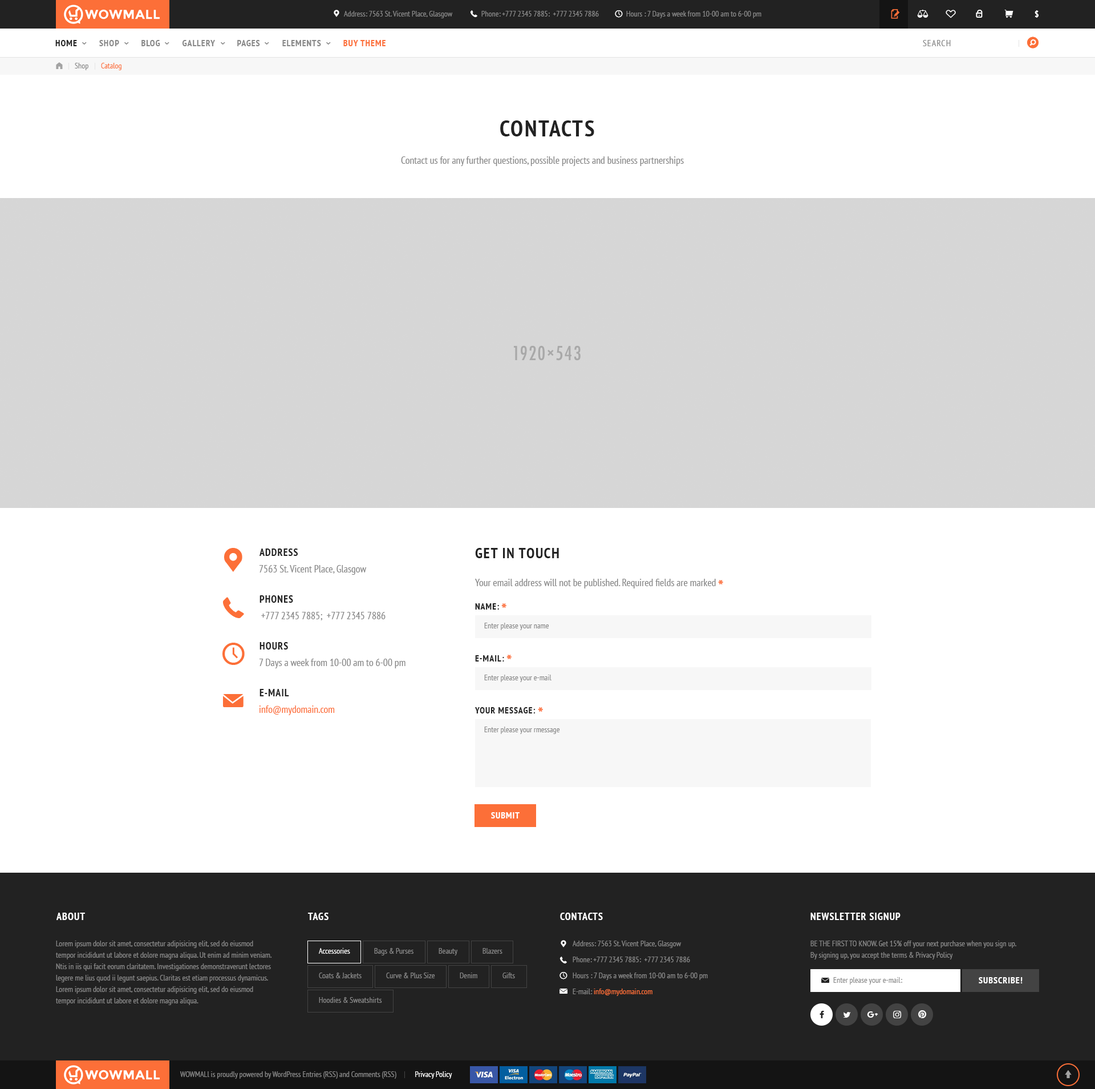
<style>
.page{position:relative;width:1095px;height:1089px;background:#ffffff}
.page>*{position:absolute;margin:0}
.t1{font:8px "PTSans-Narrow";color:#888888}
.t2{font:9.1px "PTSans-NarrowBold";letter-spacing:0.06em;color:#ffffff;text-transform:uppercase}
.t3{font:9.1px "PTSans-NarrowBold";letter-spacing:0.06em;color:#888888;text-transform:uppercase}
.t4{font:9.1px "PTSans-NarrowBold";letter-spacing:0.06em;color:#222222;text-transform:uppercase}
.t5{font:9.1px "PTSans-NarrowBold";letter-spacing:0.06em;color:#fc6f38;text-transform:uppercase}
.t6{font:9.1px "PTSans-Narrow";letter-spacing:0.06em;color:#888888;text-transform:uppercase}
.t7{font:8px "PTSans-Narrow";color:#fc6f38}
.t8{font:22.8px "PTSans-NarrowBold";letter-spacing:0.06em;color:#222222;text-transform:uppercase}
.t9{font:10.3px "PTSans-Narrow";color:#888888}
.t10{font:10.3px "PTSans-NarrowBold";letter-spacing:0.06em;color:#222222;text-transform:uppercase}
.t11{font:14.8px "PTSans-NarrowBold";letter-spacing:0.06em;color:#222222;text-transform:uppercase}
.t12{font:17.1px "PTSans-NarrowBold";letter-spacing:0.06em;color:#fc6f38;text-transform:uppercase}
.t13{font:10.3px "PTSans-Narrow";color:#fc6f38}
.t14{font:10.3px "PTSans-NarrowBold";letter-spacing:0.06em;color:#ffffff;text-transform:uppercase}
.t15{font:8px/11.4px "PTSans-Narrow";color:#888888}
.t16{font:8px/16px "PTSans-Narrow";color:#888888}
.t17{font:8px/16px "PTSans-Narrow";color:#fc6f38}
.t18{font:8px "PTSans-Narrow";color:#ffffff}
</style>
<div class="page">
<p class="t1" style="left:344px;top:11px;width:109px;height:7px">Address: 7563 St. Vicent Place, Glasgow</p>
<p class="t1" style="left:482px;top:11px;width:117px;height:6px">Phone: +777 2345 7885:  +777 2345 7886</p>
<p class="t1" style="left:626px;top:11px;width:136px;height:7px">Hours : 7 Days a week from 10-00 am to 6-00 pm</p>
<p class="t2" style="left:1035px;top:10px;width:4px;height:8px">$</p>
<p class="t3" style="left:55px;top:40px;width:331px;height:6px"><span class="t4">Home </span>        Shop         Blog         Gallery         Pages         elements         <span class="t5">Buy Theme</span></p>
<p class="t6" style="left:923px;top:40px;width:28px;height:6px">Search</p>
<p class="t1" style="left:75px;top:63px;width:13px;height:7px">Shop</p>
<p class="t7" style="left:101px;top:63px;width:21px;height:7px">Catalog</p>
<p class="t8" style="left:500px;top:120px;width:94px;height:16px">Contacts</p>
<p class="t9" style="left:401px;top:156px;width:283px;height:10px">Contact us for any further questions, possible projects and business partnerships</p>
<p class="t10" style="left:260px;top:548px;width:38px;height:8px">Address</p>
<p class="t11" style="left:475px;top:548px;width:84px;height:10px">GET IN TOUCH</p>
<p class="t9" style="left:259px;top:565px;width:108px;height:10px">7563 St. Vicent Place, Glasgow</p>
<p class="t9" style="left:475px;top:579px;width:241px;height:9px">Your email address will not be published. Required fields are marked</p>
<p class="t12" style="left:718px;top:580px;width:5px;height:4px">*</p>
<p class="t10" style="left:260px;top:595px;width:33px;height:7px">phones</p>
<p class="t4" style="left:475px;top:603px;width:24px;height:6px">Name:</p>
<p class="t12" style="left:501px;top:603px;width:6px;height:5px">*</p>
<p class="t9" style="left:261px;top:612px;width:125px;height:8px">+777 2345 7885;  +777 2345 7886</p>
<p class="t1" style="left:484px;top:622px;width:65px;height:8px">Enter please your name</p>
<p class="t10" style="left:260px;top:642px;width:28px;height:7px">hours</p>
<p class="t9" style="left:259px;top:658px;width:147px;height:10px">7 Days a week from 10-00 am to 6-00 pm</p>
<p class="t4" style="left:475px;top:655px;width:29px;height:6px">e-mail:</p>
<p class="t12" style="left:507px;top:654px;width:5px;height:5px">*</p>
<p class="t1" style="left:484px;top:674px;width:68px;height:8px">Enter please your e-mail</p>
<p class="t10" style="left:260px;top:689px;width:29px;height:7px">E-mail</p>
<p class="t13" style="left:259px;top:705px;width:76px;height:10px">info@mydomain.com</p>
<p class="t4" style="left:475px;top:707px;width:61px;height:6px">YOUR message:</p>
<p class="t12" style="left:538px;top:707px;width:5px;height:4px">*</p>
<p class="t1" style="left:484px;top:726px;width:76px;height:8px">Enter please your rmessage</p>
<p class="t2" style="left:491px;top:812px;width:29px;height:6px">Submit</p>
<p class="t14" style="left:56px;top:912px;width:29px;height:8px">About</p>
<p class="t14" style="left:308px;top:912px;width:21px;height:8px">Tags</p>
<p class="t14" style="left:560px;top:912px;width:43px;height:8px">Contacts</p>
<p class="t14" style="left:811px;top:912px;width:90px;height:8px">NEWSLETTER SIGNUP</p>
<p class="t15" style="left:56px;top:940px;width:216px;height:65px">Lorem ipsum dolor sit amet, consectetur adipisicing elit, sed do eiusmod tempor incididunt ut labore et dolore magna aliqua. Ut enim ad minim veniam. Ntis in iis qui facit eorum claritatem. Investigationes demonstraverunt lectores legere me lius quod ii legunt saepius. Claritas est etiam processus dynamicus. Lorem ipsum dolor sit amet, consectetur adipisicing elit, sed do eiusmod tempor incididunt ut labore et dolore magna aliqua.</p>
<p class="t16" style="left:573px;top:940px;width:135px;height:56px">Address: 7563 St. Vicent Place, Glasgow<br>Phone: +777 2345 7885:  +777 2345 7886<br>Hours : 7 Days a week from 10-00 am to 6-00 pm<br>E-mail: <span class="t17">info@mydomain.com</span></p>
<p class="t15" style="left:811px;top:940px;width:206px;height:19px">BE THE FIRST TO KNOW. Get 15% off your next purchase when you sign up. <br>By signing up, you accept the terms &amp; Privacy Policy</p>
<p class="t18" style="left:319px;top:948px;width:31px;height:5px">Accessories</p>
<p class="t1" style="left:374px;top:948px;width:40px;height:7px">Bags &amp; Purses</p>
<p class="t1" style="left:439px;top:948px;width:19px;height:7px">Beauty</p>
<p class="t1" style="left:483px;top:948px;width:20px;height:5px">Blazers</p>
<p class="t1" style="left:319px;top:972px;width:43px;height:6px">Coats &amp; Jackets</p>
<p class="t1" style="left:386px;top:972px;width:49px;height:6px">Curve &amp; Plus Size</p>
<p class="t1" style="left:460px;top:972px;width:18px;height:6px">Denim</p>
<p class="t1" style="left:503px;top:972px;width:12px;height:6px">Gifts</p>
<p class="t1" style="left:834px;top:977px;width:69px;height:7px">Enter please your e-mail:</p>
<p class="t2" style="left:979px;top:977px;width:44px;height:6px">Subscribe!</p>
<p class="t1" style="left:319px;top:997px;width:63px;height:5px">Hoodies &amp; Sweatshirts</p>
<p class="t1" style="left:180px;top:1071px;width:272px;height:7px">WOWMALl is proudly powered by WordPress Entries (RSS) and Comments (RSS)           <span class="t18">Privacy Policy</span></p>
</div>
